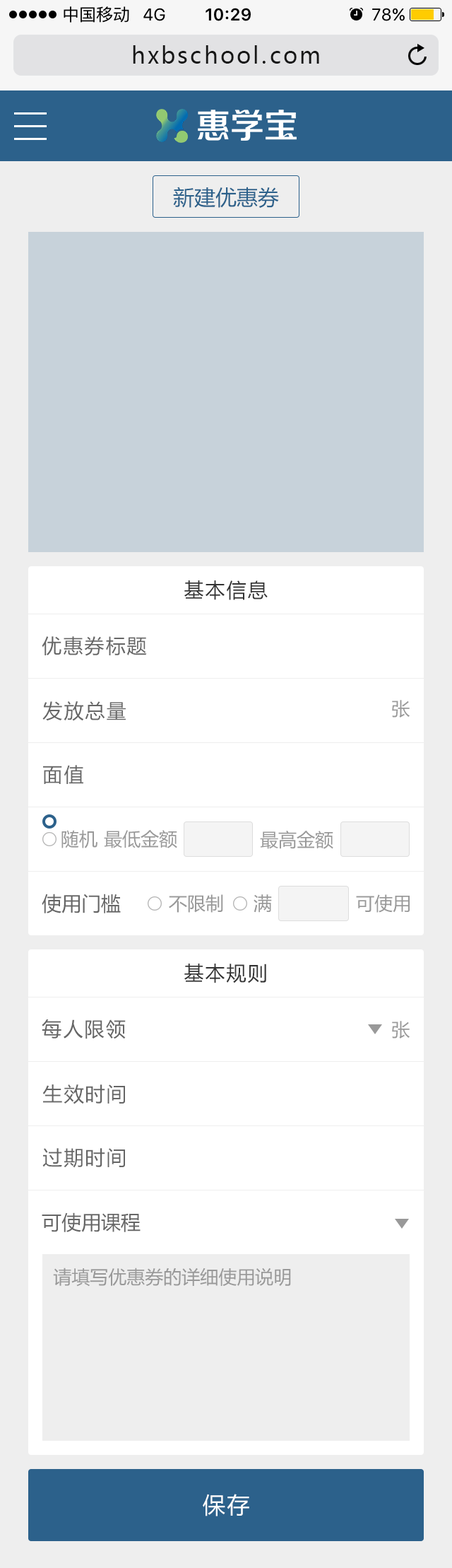
<style>
.page{position:relative;width:452px;height:1568px;background:#ffffff}
.page>*{position:absolute;margin:0}
.t1{font:22.6px "MicrosoftYaHei";letter-spacing:0.1em;color:#171717}
.t2{font:21.2px "MicrosoftYaHei";color:#2c618b}
.t3{font:19.8px "MicrosoftYaHei";letter-spacing:0.075em;color:#333333}
.t4{font:19.8px "MicrosoftYaHei";letter-spacing:0.075em;color:#666666}
.t5{font:18.4px "MicrosoftYaHei";letter-spacing:0.075em;color:#999999}
.t6{font:18.4px "MicrosoftYaHei";color:#999999}
.t7{font:19.8px "MicrosoftYaHei";color:#666666}
.t8{font:22.6px "MicrosoftYaHei";letter-spacing:0.075em;color:#ffffff}
</style>
<div class="page">
<p class="t1" style="left:133px;top:45px;width:187px;height:19px">hxbschool.com</p>
<p class="t2" style="left:173px;top:187px;width:106px;height:21px">新建优惠券</p>
<p class="t3" style="left:185px;top:580px;width:83px;height:20px">基本信息</p>
<p class="t4" style="left:42px;top:636px;width:105px;height:20px">优惠券标题</p>
<p class="t4" style="left:42px;top:701px;width:84px;height:20px">发放总量</p>
<p class="t5" style="left:392px;top:700px;width:18px;height:18px">张</p>
<p class="t4" style="left:43px;top:765px;width:40px;height:19px">面值</p>
<p class="t6" style="left:62px;top:830px;width:36px;height:18px">随机</p>
<p class="t6" style="left:104px;top:830px;width:73px;height:18px">最低金额</p>
<p class="t6" style="left:260px;top:831px;width:74px;height:18px">最高金额</p>
<p class="t7" style="left:42px;top:894px;width:79px;height:19px">使用门槛</p>
<p class="t6" style="left:169px;top:894px;width:54px;height:19px">不限制</p>
<p class="t6" style="left:254px;top:894px;width:18px;height:19px">满</p>
<p class="t6" style="left:356px;top:894px;width:54px;height:19px">可使用</p>
<p class="t3" style="left:185px;top:964px;width:82px;height:19px">基本规则</p>
<p class="t4" style="left:42px;top:1019px;width:84px;height:20px">每人限领</p>
<p class="t5" style="left:392px;top:1021px;width:18px;height:17px">张</p>
<p class="t4" style="left:42px;top:1084px;width:83px;height:20px">生效时间</p>
<p class="t4" style="left:42px;top:1148px;width:83px;height:20px">过期时间</p>
<p class="t7" style="left:42px;top:1212px;width:99px;height:20px">可使用课程</p>
<p class="t6" style="left:53px;top:1268px;width:238px;height:19px">请填写优惠券的详细使用说明</p>
<p class="t8" style="left:203px;top:1494px;width:47px;height:22px">保存</p>
</div>
